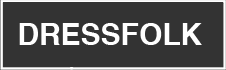
<style>
.page{position:relative;width:226px;height:70px;background:#333333}
.page>*{position:absolute;margin:0}
.t1{font:30px "Helvetica-Bold";color:#ffffff}
</style>
<div class="page">
<p class="t1" style="left:19px;top:23px;width:183px;height:22px">DRESSFOLK</p>
</div>
